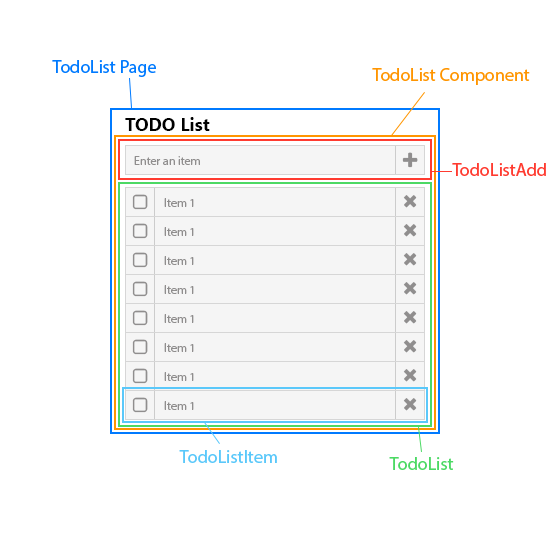
<style>
.page{position:relative;width:550px;height:550px;background:#ffffff}
.page>*{position:absolute;margin:0}
.t1{font:18px "MyriadPro-Regular";color:#007aff}
.t2{font:18px "MyriadPro-Regular";color:#ff9500}
.t3{font:18px "SegoeUI-Bold";color:#000000}
.t4{font:12px "MyriadPro-Regular";color:#817f7f}
.t5{font:18px "MyriadPro-Regular";color:#ff3b30}
.t6{font:18px "MyriadPro-Regular";color:#5ac8fa}
.t7{font:18px "MyriadPro-Regular";color:#4cd964}
</style>
<div class="page">
<p class="t1" style="left:52px;top:60px;width:104px;height:17px">TodoList Page</p>
<p class="t2" style="left:372px;top:68px;width:158px;height:17px">TodoList Component</p>
<p class="t3" style="left:125px;top:117px;width:85px;height:14px">TODO List</p>
<p class="t4" style="left:134px;top:156px;width:66px;height:9px">Enter an item</p>
<p class="t5" style="left:452px;top:163px;width:94px;height:13px">TodoListAdd</p>
<p class="t4" style="left:164px;top:198px;width:30px;height:9px">Item 1</p>
<p class="t4" style="left:164px;top:227px;width:30px;height:9px">Item 1</p>
<p class="t4" style="left:164px;top:256px;width:30px;height:9px">Item 1</p>
<p class="t4" style="left:164px;top:285px;width:30px;height:9px">Item 1</p>
<p class="t4" style="left:164px;top:314px;width:30px;height:9px">Item 1</p>
<p class="t4" style="left:164px;top:343px;width:30px;height:9px">Item 1</p>
<p class="t4" style="left:164px;top:372px;width:30px;height:9px">Item 1</p>
<p class="t4" style="left:164px;top:401px;width:30px;height:9px">Item 1</p>
<p class="t6" style="left:179px;top:450px;width:98px;height:13px">TodoListItem</p>
<p class="t7" style="left:389px;top:457px;width:65px;height:13px">TodoList</p>
</div>
